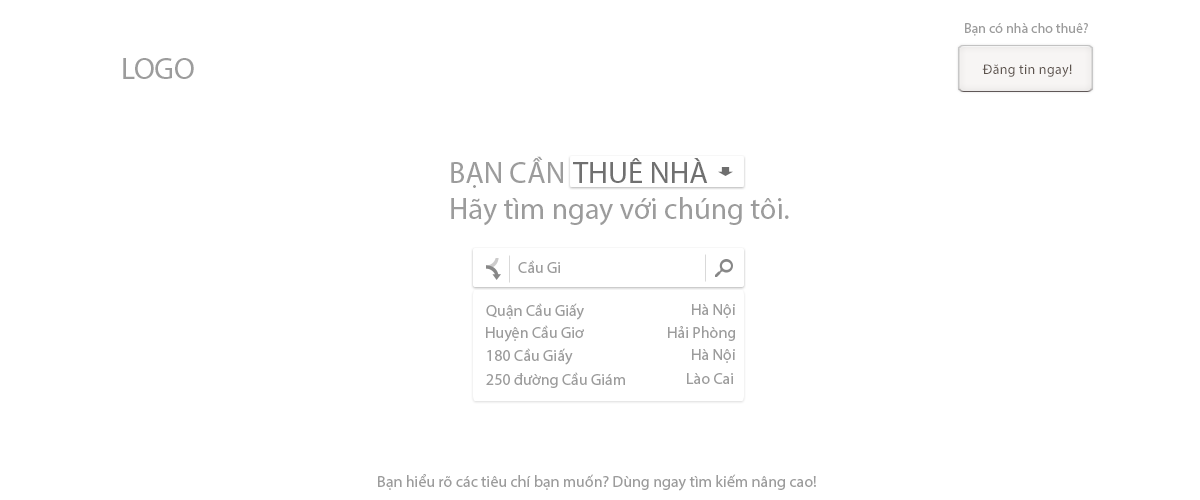
<style>
.page{position:relative;width:1200px;height:500px;background:#ffffff}
.page>*{position:absolute;margin:0}
.t1{font:14px "Tahoma";color:#9c9c9c}
.t2{font:30px "MyriadPro-Regular";color:#9c9c9c}
.t3{font:14px "MyriadPro-Regular";letter-spacing:0.02em;color:#5d534d}
.t4{font:30px "Tahoma";color:#9c9c9c}
.t5{font:30px "Tahoma";color:#707070}
.t6{font:16px "MyriadPro-Regular";color:#9c9c9c}
</style>
<div class="page">
<p class="t1" style="left:965px;top:23px;width:123px;height:13px">Bạn có nhà cho thuê?</p>
<p class="t2" style="left:123px;top:58px;width:71px;height:21px">LOGO</p>
<p class="t3" style="left:982px;top:64px;width:90px;height:13px">Đăng tin ngay!</p>
<p class="t4" style="left:451px;top:156px;width:338px;height:70px">BẠN CẦN <br>Hãy tìm ngay với chúng tôi.</p>
<p class="t5" style="left:573px;top:158px;width:135px;height:25px">THUÊ NHÀ</p>
<p class="t6" style="left:518px;top:260px;width:42px;height:13px">Cầu Gi</p>
<p class="t6" style="left:486px;top:303px;width:98px;height:17px">Quận Cầu Giấy</p>
<p class="t6" style="left:692px;top:304px;width:43px;height:14px">Hà Nội</p>
<p class="t6" style="left:486px;top:325px;width:98px;height:17px">Huyện Cầu Giơ</p>
<p class="t6" style="left:668px;top:326px;width:67px;height:15px">Hải Phòng</p>
<p class="t6" style="left:487px;top:348px;width:86px;height:17px">180 Cầu Giấy</p>
<p class="t6" style="left:692px;top:349px;width:43px;height:14px">Hà Nội</p>
<p class="t6" style="left:486px;top:372px;width:139px;height:16px">250 đường Cầu Giám</p>
<p class="t6" style="left:687px;top:373px;width:46px;height:11px">Lào Cai</p>
<p class="t6" style="left:378px;top:474px;width:438px;height:17px">Bạn hiểu rõ các tiêu chí bạn muốn? Dùng ngay tìm kiếm nâng cao!</p>
</div>
